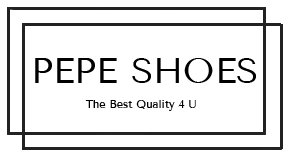
<style>
.page{position:relative;width:300px;height:163px;background:#ffffff}
.page>*{position:absolute;margin:0}
.t1{font:36px "TenorSans";color:#000000}
.t2{font:11px "TenorSans";color:#000000}
</style>
<div class="page">
<p class="t1" style="left:35px;top:58px;width:221px;height:25px">PEPE SHOES</p>
<p class="t2" style="left:85px;top:100px;width:111px;height:11px">The Best Quality 4 U</p>
</div>
